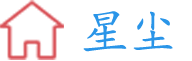
<style>
.page{position:relative;width:192px;height:61px;background:#ffffff}
.page>*{position:absolute;margin:0}
.t1{font:49.8px "KaiTi";letter-spacing:-0.02em;color:#2a95e8;text-transform:uppercase}
.t2{font:33.2px "MicrosoftYaHei-Bold";letter-spacing:-0.02em;color:#2a95e8;text-transform:uppercase}
</style>
<div class="page">
<p class="t1" style="left:83px;top:11px;width:90px;height:41px"><span class="t2"> </span>星尘</p>
</div>
